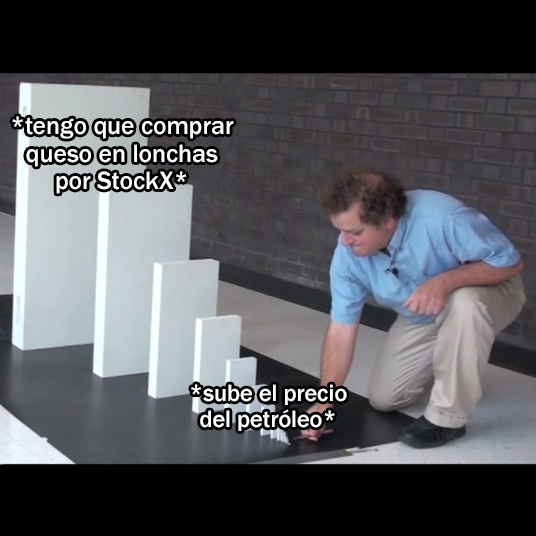
<style>
.page{position:relative;width:536px;height:536px;background:#000000}
.page>*{position:absolute;margin:0}
.t1{font:25.7px "FranklinGothic-Medium";color:#ffffff}
.t2{font:24.2px "FranklinGothic-Medium";color:#ffffff}
</style>
<div class="page">
<p class="t1" style="left:12px;top:116px;width:222px;height:78px;text-align:center">*tengo que comprar<br>queso en lonchas<br>por StockX*</p>
<p class="t2" style="left:191px;top:384px;width:156px;height:47px;text-align:center">*sube el precio<br>del petróleo*</p>
</div>
